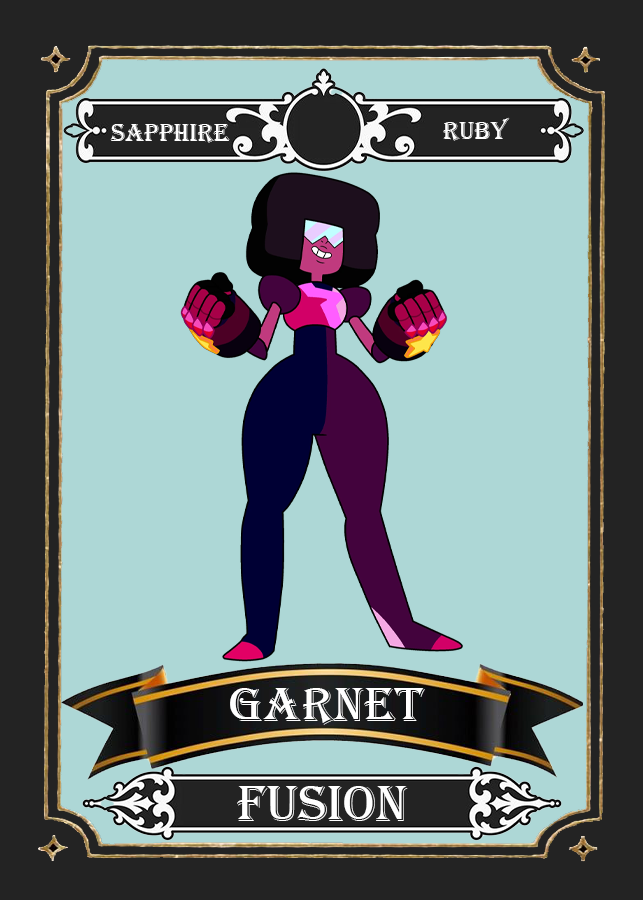
<style>
.page{position:relative;width:643px;height:900px;background:#add7d6}
.page>*{position:absolute;margin:0}
.t1{font:25.2px "Algerian";color:#ffffff}
.t2{font:50.4px "Algerian";color:#ffffff}
.t3{font:52.6px "Algerian";color:#ffffff}
</style>
<div class="page">
<p class="t1" style="left:110px;top:124px;width:120px;height:19px">sapphire</p>
<p class="t1" style="left:443px;top:117px;width:67px;height:24px">Ruby</p>
<p class="t2" style="left:230px;top:688px;width:195px;height:37px">Garnet</p>
<p class="t3" style="left:237px;top:786px;width:171px;height:35px">Fusion</p>
</div>
